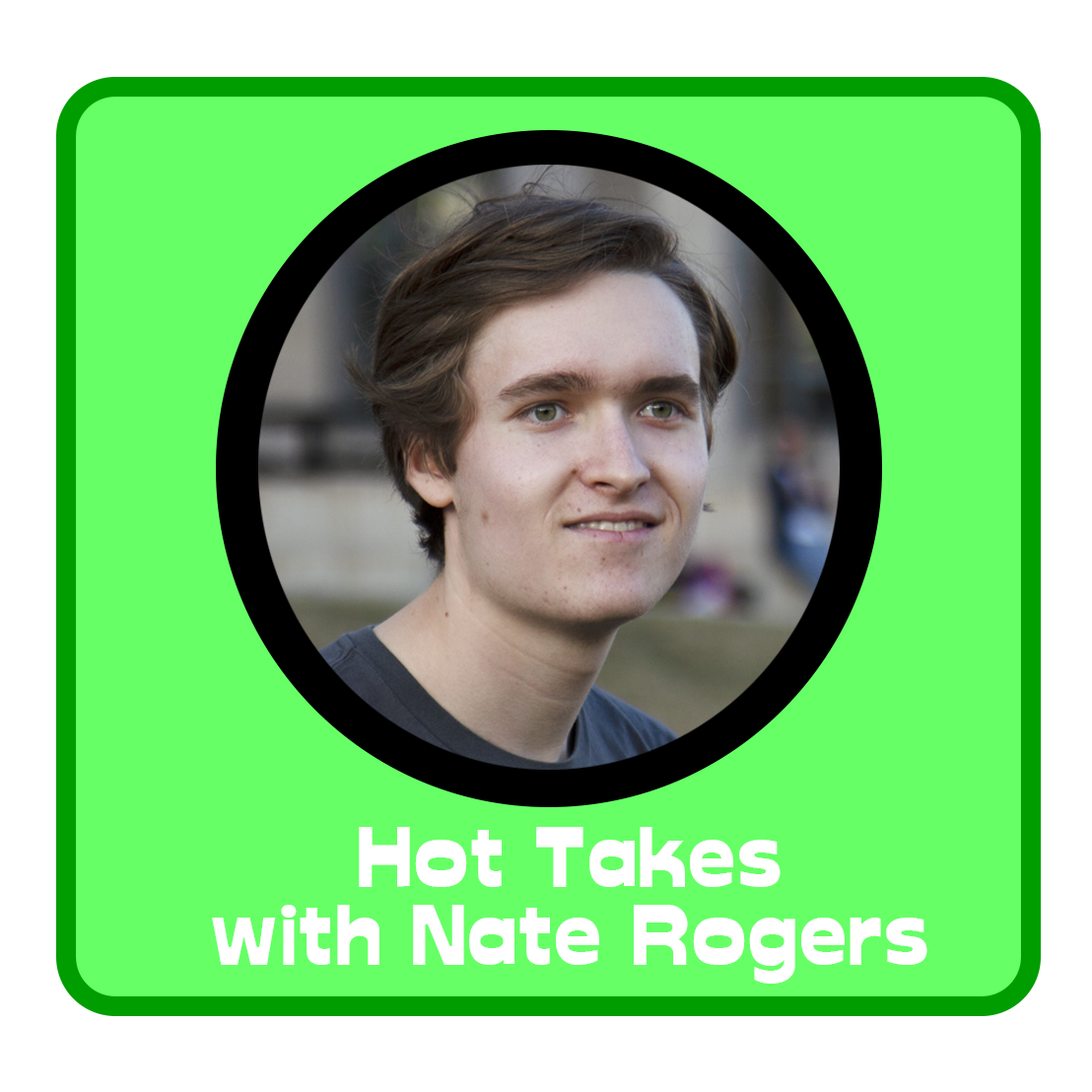
<style>
.page{position:relative;width:1092px;height:1092px;background:#66ff66}
.page>*{position:absolute;margin:0}
.t1{font:82.1px/78px "Glockenspiel";color:#ffffff}
</style>
<div class="page">
<p class="t1" style="left:212px;top:827px;width:715px;height:157px;text-align:center">Hot Takes<br>with Nate Rogers</p>
</div>
